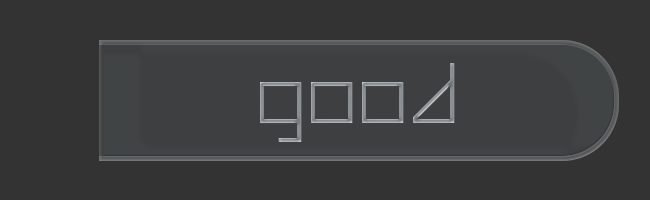
<style>
.page{position:relative;width:650px;height:200px;background:#333333}
.page>*{position:absolute;margin:0}
.t1{font:120px "AuricomRegular";letter-spacing:0.05em}
</style>
<div class="page">
<p class="t1" style="left:260px;top:63px;width:195px;height:79px">good</p>
</div>
